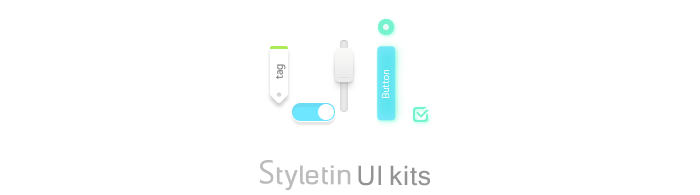
<style>
.page{position:relative;width:700px;height:195px;background:#ffffff}
.page>*{position:absolute;margin:0}
.t1{font:10px "MicrosoftYaHei";letter-spacing:-0.04em}
.t2{font:8.9px "NotoSansHans-Light";letter-spacing:0.044em;color:#ffffff}
.t3{font:29.1px "Gautami";letter-spacing:0.02em;color:#7b7b7b}
</style>
<div class="page">
<p class="t1" style="left:275px;top:64px;width:11px;height:15px;rotate:-90deg">tag</p>
<p class="t2" style="left:381px;top:70px;width:9px;height:28px;rotate:-90deg;opacity:0.85">Button</p>
<p class="t3" style="left:358px;top:165px;width:72px;height:21px;opacity:0.82">UI kits</p>
</div>
